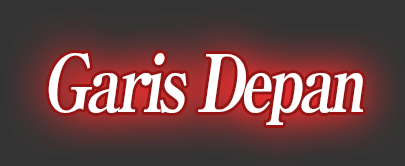
<style>
.page{position:relative;width:405px;height:166px}
.page>*{position:absolute;margin:0}
.t1{font:80px "RyuminPro-ExBold";letter-spacing:-0.08em;color:#ffffff;font-style:italic;scale:0.8 1}
</style>
<div class="page">
<p class="t1" style="left:48px;top:53px;width:315px;height:72px">Garis Depan</p>
</div>
